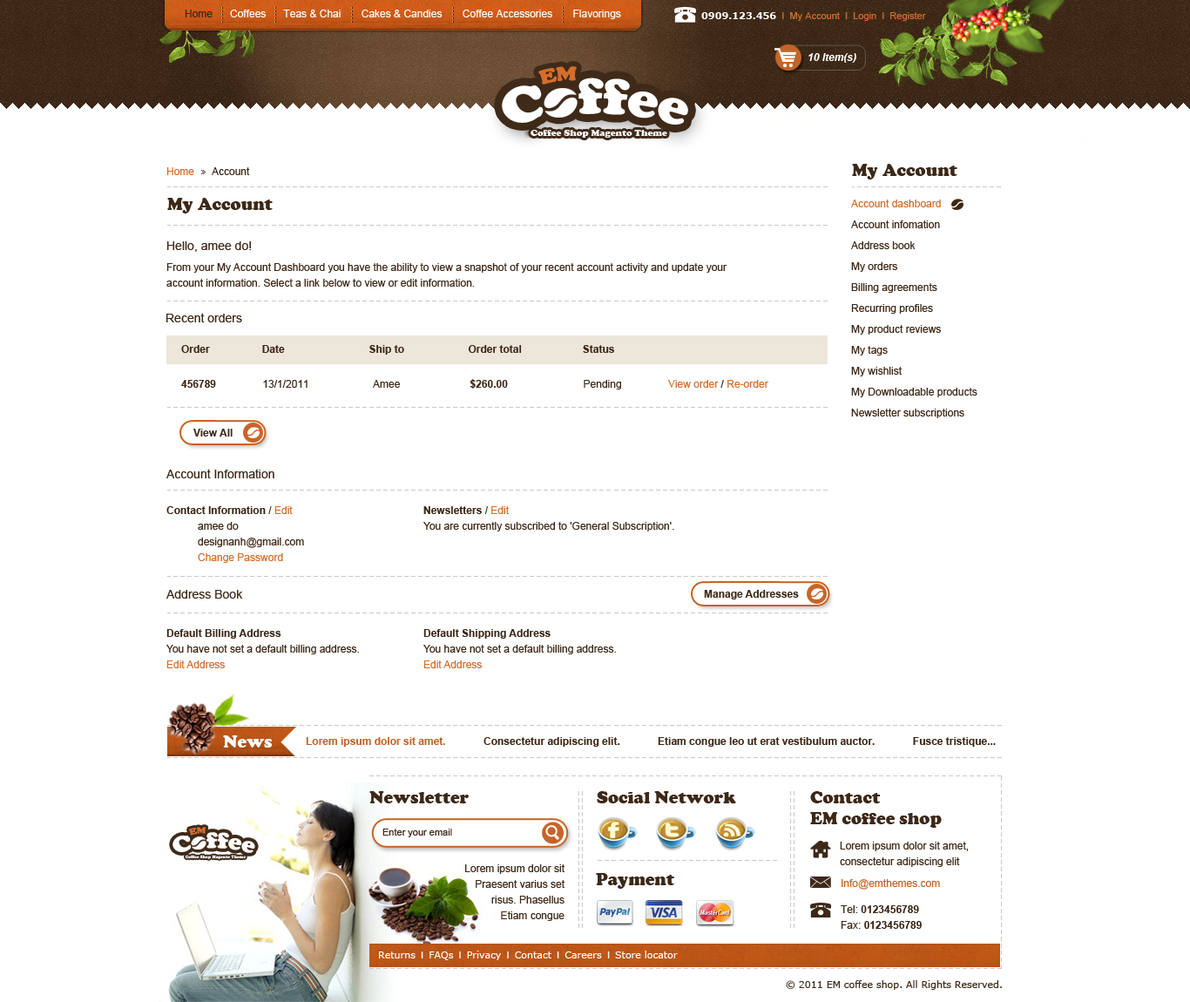
<style>
.page{position:relative;width:1190px;height:1002px;background:#ffffff}
.page>*{position:absolute;margin:0}
.t1{font:10.5px "ArialMT";color:#fefefe}
.t2{font:10.5px "ArialMT";color:#3d2817}
.t3{font:9.6px "ArialMT";color:#d56d2b}
.t4{font:9.6px "Verdana-Bold";color:#ffffff}
.t5{font:10.5px "Arial-BoldItalicMT";color:#ffffff}
.t6{font:10.5px "ArialMT";color:#d56d2b}
.t7{font:17.4px "CooperBlack";color:#3d2817}
.t8{font:10.5px/20.9px "ArialMT";color:#3d2817}
.t9{font:10.5px/20.9px "ArialMT";color:#d56d2b}
.t10{font:12.2px/20.9px "ArialMT";color:#3d2817}
.t11{font:10.5px/15.7px "ArialMT";color:#3d2817}
.t12{font:12.2px "ArialMT";color:#3d2817}
.t13{font:10.5px "Arial-BoldMT";color:#3d2817}
.t14{font:10.5px/20.9px "Arial-BoldMT";color:#3d2817}
.t15{font:10.5px/15.7px "ArialMT";color:#d56d2b}
.t16{font:17.4px "CooperBlack";color:#ffffff}
.t17{font:10.5px "Arial-BoldMT";color:#c26529}
.t18{font:17.4px/20.9px "CooperBlack";color:#3d2817}
.t19{font:9.6px "ArialMT";color:#3d2817}
.t20{font:10.5px/26.1px "ArialMT";color:#c26529}
.t21{font:10.5px/26.1px "ArialMT";color:#3d2817}
.t22{font:10.5px/26.1px "Arial-BoldMT";color:#3d2817}
.t23{font:10.5px/15.7px "Arial-BoldMT";color:#3d2817}
.t24{font:9.6px "Verdana";color:#ffffff}
.t25{font:9.6px "ArialMT";color:#ffffff}
.t26{font:9.6px "Verdana";color:#3d2817}
</style>
<div class="page">
<p class="t1" style="left:185px;top:10px;width:436px;height:9px"><span class="t2">Home</span>      Coffees      Teas &amp; Chai       Cakes &amp; Candies       Coffee Accessories       Flavorings</p>
<p class="t3" style="left:701px;top:12px;width:225px;height:9px"><span class="t4">0909.123.456</span>  I  My Account  I  Login  I  Register</p>
<p class="t5" style="left:809px;top:53px;width:47px;height:10px">10 Item(s)</p>
<p class="t2" style="left:166px;top:167px;width:84px;height:8px"><span class="t6">Home</span>      Account</p>
<p class="t7" style="left:852px;top:164px;width:106px;height:15px">My Account</p>
<p class="t7" style="left:167px;top:198px;width:106px;height:15px">My Account</p>
<p class="t8" style="left:851px;top:200px;width:127px;height:218px"><span class="t9">Account dashboard<br></span>Account infomation<br>Address book<br>My orders<br>Billing agreements<br>Recurring profiles<br>My product reviews<br>My tags<br>My wishlist<br>My Downloadable products<br>Newsletter subscriptions</p>
<p class="t8" style="left:166px;top:241px;width:561px;height:46px"><span class="t10">Hello, amee do!<br></span>From your My Account Dashboard you have the ability to view a snapshot of your recent account activity and update your <br><span class="t11">account information. Select a link below to view or edit information.</span></p>
<p class="t12" style="left:166px;top:313px;width:76px;height:9px">Recent orders</p>
<p class="t13" style="left:181px;top:345px;width:433px;height:10px">Order                  Date                             Ship to                      Order total                     Status</p>
<p class="t2" style="left:181px;top:379px;width:587px;height:10px"><span class="t13">456789</span>                13/1/2011                      Amee                        <span class="t13">$260.00                          </span>Pending                <span class="t6">View order </span>/ <span class="t6">Re-order</span></p>
<p class="t13" style="left:193px;top:429px;width:40px;height:7px">View All</p>
<p class="t12" style="left:166px;top:469px;width:108px;height:9px">Account Information</p>
<p class="t11" style="left:166px;top:506px;width:138px;height:57px"><span class="t14">Contact Information / </span><span class="t9">Edit<br> </span>amee do<br> designanh@gmail.com<br> <span class="t15">Change Password</span></p>
<p class="t11" style="left:423px;top:506px;width:251px;height:25px"><span class="t14">Newsletters / </span><span class="t9">Edit<br></span>You are currently subscribed to 'General Subscription'.</p>
<p class="t12" style="left:166px;top:590px;width:77px;height:9px">Address Book</p>
<p class="t13" style="left:704px;top:590px;width:95px;height:9px">Manage Addresses</p>
<p class="t11" style="left:166px;top:629px;width:193px;height:39px"><span class="t14">Default Billing Address<br></span>You have not set a default billing address.<br><span class="t15">Edit Address</span></p>
<p class="t11" style="left:423px;top:629px;width:193px;height:39px"><span class="t14">Default Shipping Address<br></span>You have not set a default billing address.<br><span class="t15">Edit Address</span></p>
<p class="t16" style="left:223px;top:735px;width:49px;height:13px">News</p>
<p class="t13" style="left:306px;top:737px;width:690px;height:10px"><span class="t17">Lorem ipsum dolor sit amet.</span>             Consectetur adipiscing elit.             Etiam congue leo ut erat vestibulum auctor.             Fusce tristique...</p>
<p class="t7" style="left:369px;top:791px;width:100px;height:12px">Newsletter</p>
<p class="t7" style="left:597px;top:791px;width:139px;height:12px">Social Network</p>
<p class="t18" style="left:810px;top:791px;width:132px;height:37px">Contact<br>EM coffee shop</p>
<p class="t19" style="left:382px;top:829px;width:70px;height:8px">Enter your email</p>
<p class="t11" style="left:840px;top:842px;width:129px;height:25px">Lorem ipsum dolor sit amet, <br>consectetur adipiscing elit</p>
<p class="t11" style="left:465px;top:864px;width:100px;height:57px;text-align:right">Lorem ipsum dolor sit<br>Praesent varius set<br>risus. Phasellus<br>Etiam congue</p>
<p class="t7" style="left:596px;top:873px;width:78px;height:16px">Payment</p>
<p class="t20" style="left:841px;top:879px;width:99px;height:50px">Info@emthemes.com<br><span class="t21">Tel: </span><span class="t22">0123456789<br></span><span class="t11">Fax: </span><span class="t23">0123456789</span></p>
<p class="t24" style="left:379px;top:951px;width:299px;height:9px">Returns<span class="t25">  I  </span>FAQs<span class="t25">  I  </span>Privacy<span class="t25">  I  </span>Contact<span class="t25">  I  </span>Careers<span class="t25">  I  </span>Store locator</p>
<p class="t26" style="left:786px;top:980px;width:216px;height:10px">© 2011 EM coffee shop. All Rights Reserved.</p>
</div>
